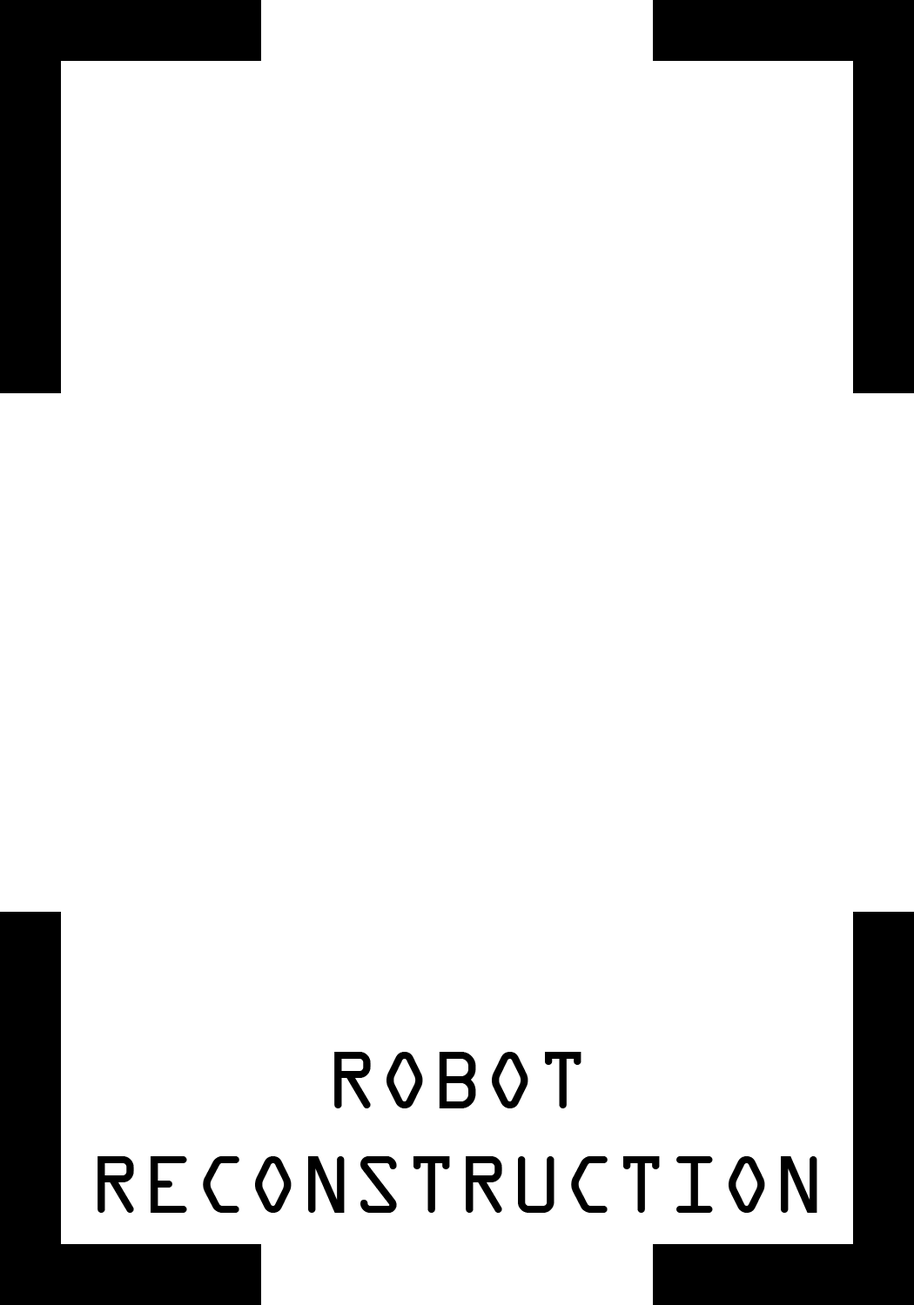
<style>
.page{position:relative;width:914px;height:1305px;background:#ffffff}
.page>*{position:absolute;margin:0}
.t1{font:87px "OCRAExtended";color:#000000}
</style>
<div class="page">
<p class="t1" style="left:97px;top:1052px;width:720px;height:161px;text-align:center">ROBOT<br>RECONSTRUCTION</p>
</div>
